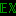
<style>
.page{position:relative;width:16px;height:16px;background:#000000}
.page>*{position:absolute;margin:0}
.t1{font:16px "UnifontExMono";color:#009900}
</style>
<div class="page">
<p class="t1" style="left:0px;top:3px;width:7px;height:10px">𝔼</p>
<p class="t1" style="left:8px;top:3px;width:8px;height:10px">𝕏</p>
</div>
